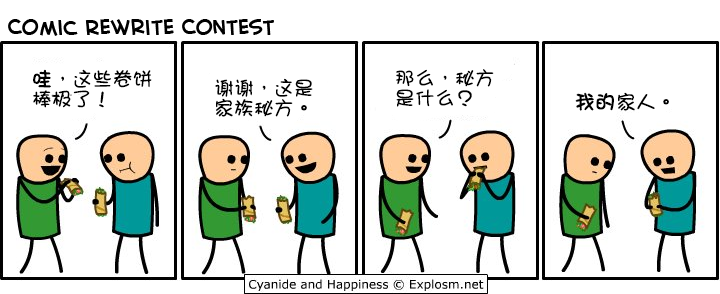
<style>
.page{position:relative;width:720px;height:294px;background:#ffffff}
.page>*{position:absolute;margin:0}
.t1{font:20px/20px "DFGirl";color:#000000}
.t2{font:20px/20px "DFGirl";color:#000000;font-weight:bold}
.t3{font:20px "DFGirl";color:#000000}
.t4{font:20px "DFGirl";color:#000000;font-weight:bold}
</style>
<div class="page">
<p class="t1" style="left:33px;top:69px;width:119px;height:39px"><span class="t2">哇</span>，这些卷饼<br>棒极了！</p>
<p class="t1" style="left:215px;top:78px;width:98px;height:39px">谢谢，这是<br>家族秘方。</p>
<p class="t1" style="left:396px;top:69px;width:98px;height:38px">那么，秘方<br>是什么？</p>
<p class="t3" style="left:575px;top:92px;width:94px;height:19px"><span class="t4">我的</span>家人。</p>
</div>
